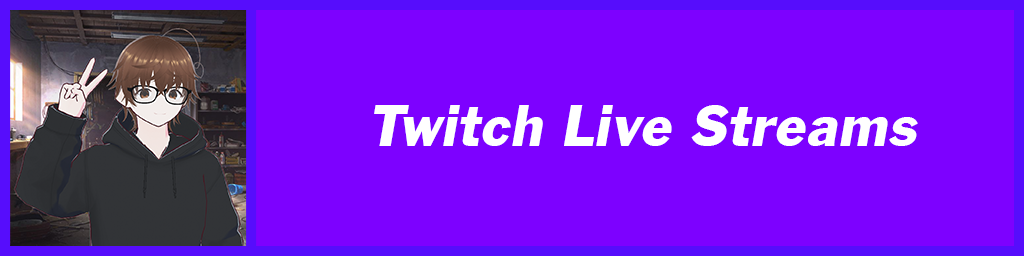
<style>
.page{position:relative;width:1024px;height:256px;background:#7d01ff}
.page>*{position:absolute;margin:0}
.t1{font:61.1px "FranklinGothicITALIC";color:#ffffff}
</style>
<div class="page">
<p class="t1" style="left:374px;top:105px;width:544px;height:41px">Twitch Live Streams</p>
</div>
